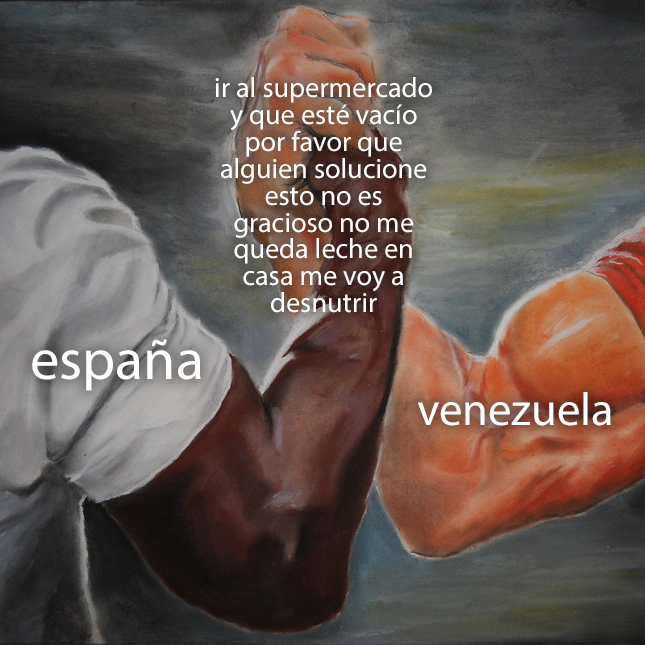
<style>
.page{position:relative;width:645px;height:645px}
.page>*{position:absolute;margin:0}
.t1{font:28.2px "MyriadPro-Regular";color:#ffffff}
.t2{font:58.3px "MyriadPro-Regular";color:#ffffff}
.t3{font:46.5px "MyriadPro-Regular";color:#ffffff}
</style>
<div class="page">
<p class="t1" style="left:215px;top:77px;width:217px;height:236px;text-align:center">ir al supermercado<br>y que esté vacío<br>por favor que<br>alguien solucione<br>esto no es<br>gracioso no me<br>queda leche en<br>casa me voy a<br>desnutrir</p>
<p class="t2" style="left:32px;top:339px;width:169px;height:52px">españa</p>
<p class="t3" style="left:417px;top:392px;width:194px;height:34px">venezuela</p>
</div>
